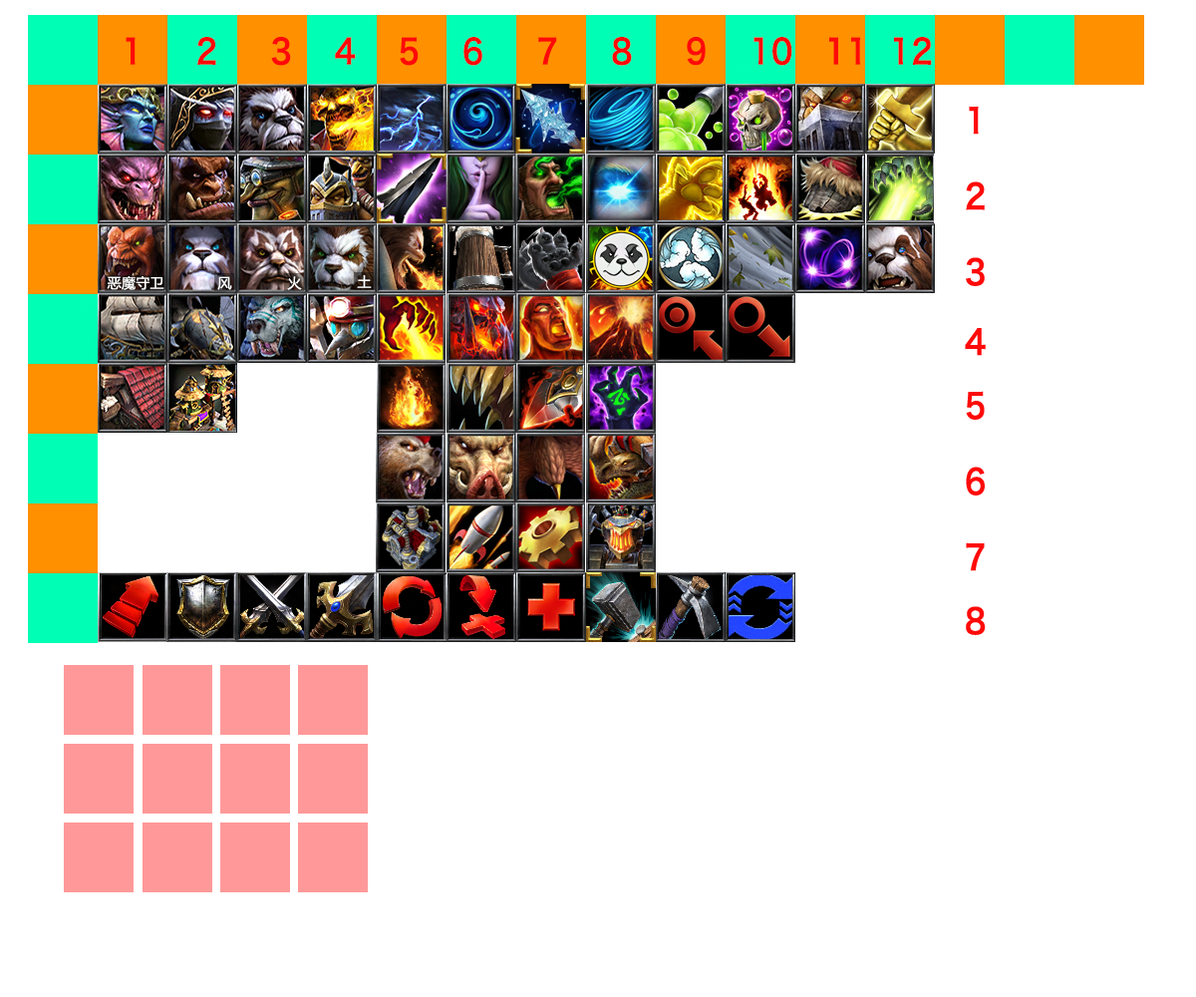
<style>
.page{position:relative;width:1196px;height:997px;background:#ffffff}
.page>*{position:absolute;margin:0}
.t1{font:33.9px "HiraginoSansGB-W6";letter-spacing:0.02em;color:#ff0909;scale:0.88 1}
.t2{font:33.9px/37.9px "HiraginoSansGB-W6";letter-spacing:0.02em;color:#ff0909;scale:0.88 1}
.t3{font:33.9px/31.9px "HiraginoSansGB-W6";letter-spacing:0.02em;color:#ff0909;scale:0.88 1}
.t4{font:14px "MicrosoftYaHeiUI";letter-spacing:0.02em;color:#ffffff}
</style>
<div class="page">
<p class="t1" style="left:126px;top:37px;width:806px;height:29px">1     2     3    4    5    6     7     8     9    10   11  12</p>
<p class="t2" style="left:965px;top:106px;width:21px;height:529px">1<br><br>2<br><br>3<br><br><span class="t3">4<br><br>5<br></span><br>6<br><br>7<span class="t3"><br><br>8</span></p>
<p class="t4" style="left:107px;top:276px;width:57px;height:14px">恶魔守卫</p>
<p class="t4" style="left:217px;top:276px;width:15px;height:14px">风</p>
<p class="t4" style="left:287px;top:276px;width:15px;height:14px">火</p>
<p class="t4" style="left:357px;top:275px;width:15px;height:13px">土</p>
</div>
